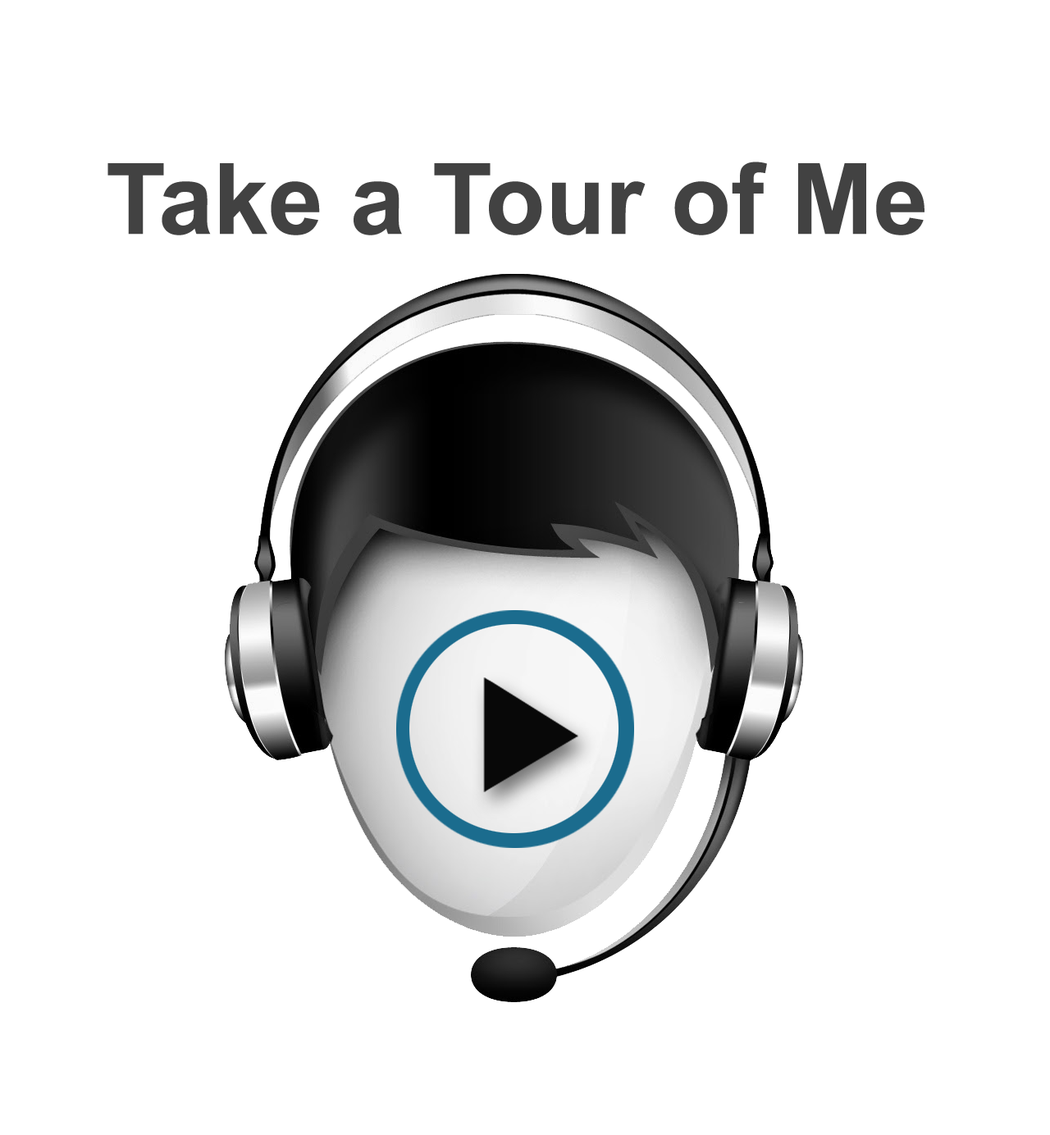
<style>
.page{position:relative;width:1050px;height:1135px;background:#ffffff}
.page>*{position:absolute;margin:0}
.t1{font:98.5px "Arial-BoldMT";color:#424242}
</style>
<div class="page">
<p class="t1" style="left:107px;top:162px;width:818px;height:73px">Take a Tour of Me</p>
</div>
